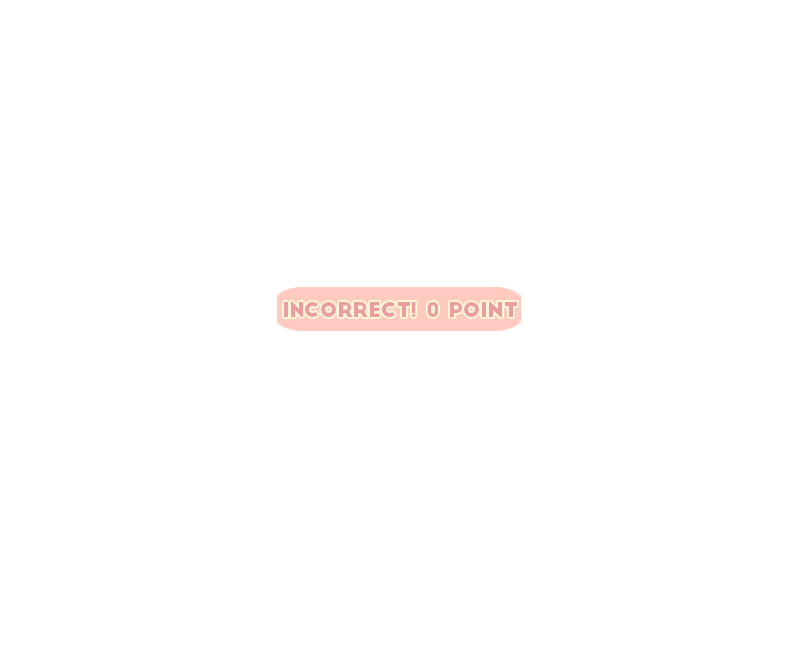
<style>
.page{position:relative;width:800px;height:650px;background:#ffffff}
.page>*{position:absolute;margin:0}
.t1{font:20.3px "BigJohn";color:#e99ea1}
</style>
<div class="page">
<p class="t1" style="left:284px;top:302px;width:233px;height:15px">incorrect! 0 point</p>
</div>
